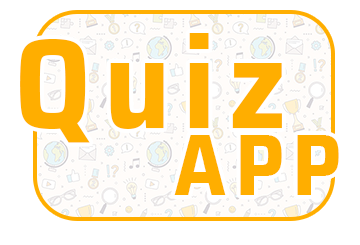
<style>
.page{position:relative;width:360px;height:245px;background:#ffffff}
.page>*{position:absolute;margin:0}
.t1{font:126.8px "SairaSemiCondensed-Bold";letter-spacing:0.1em;color:#ffae00}
.t2{font:86.5px "SairaSemiCondensed-Bold";letter-spacing:0.1em;color:#ffae00}
</style>
<div class="page">
<p class="t1" style="left:20px;top:33px;width:262px;height:110px">Quiz</p>
<p class="t2" style="left:174px;top:135px;width:165px;height:60px">APP</p>
</div>
